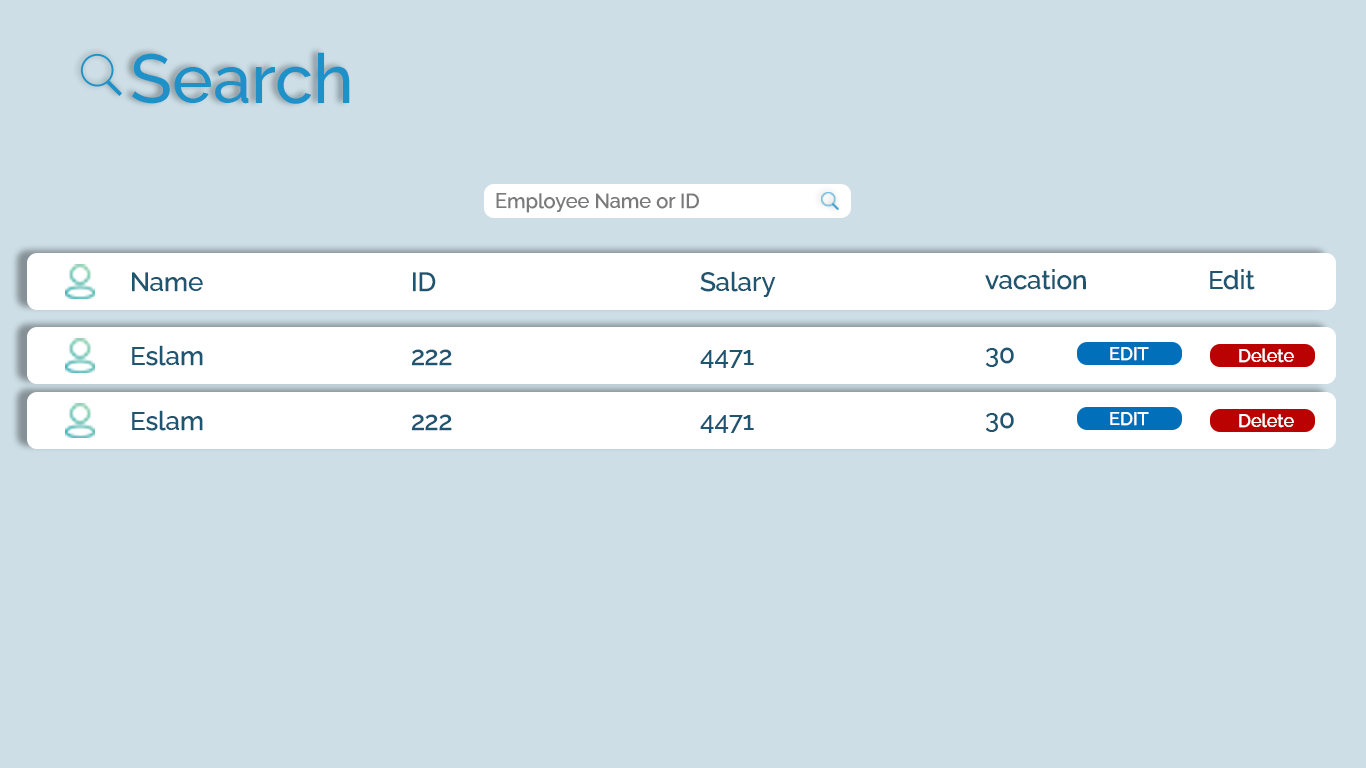
<style>
.page{position:relative;width:1366px;height:768px;background:#cddee6}
.page>*{position:absolute;margin:0}
.t1{font:69px "RalewayRoman-Medium";color:#1e92c8}
.t2{font:20px "RalewayRoman-Medium";color:#7a7a7a}
.t3{font:26px "RalewayRoman-Medium";color:#1e5571}
.t4{font:18px "RalewayRoman-Medium";color:#ffffff}
</style>
<div class="page">
<p class="t1" style="left:132px;top:52px;width:218px;height:52px">Search</p>
<p class="t2" style="left:496px;top:193px;width:203px;height:20px">Employee Name or ID</p>
<p class="t3" style="left:985px;top:269px;width:101px;height:21px">vacation</p>
<p class="t3" style="left:1210px;top:269px;width:45px;height:21px">Edit</p>
<p class="t3" style="left:132px;top:272px;width:71px;height:20px">Name</p>
<p class="t3" style="left:413px;top:272px;width:23px;height:20px">ID</p>
<p class="t3" style="left:700px;top:271px;width:76px;height:26px">Salary</p>
<p class="t3" style="left:132px;top:345px;width:71px;height:21px">Eslam</p>
<p class="t3" style="left:411px;top:349px;width:41px;height:17px">222</p>
<p class="t3" style="left:700px;top:350px;width:54px;height:18px">4471</p>
<p class="t3" style="left:985px;top:347px;width:29px;height:20px">30</p>
<p class="t4" style="left:1110px;top:347px;width:39px;height:14px">EDIT</p>
<p class="t4" style="left:1239px;top:348px;width:55px;height:15px">Delete</p>
<p class="t3" style="left:132px;top:410px;width:71px;height:21px">Eslam</p>
<p class="t3" style="left:411px;top:414px;width:41px;height:17px">222</p>
<p class="t3" style="left:985px;top:412px;width:29px;height:20px">30</p>
<p class="t4" style="left:1110px;top:412px;width:39px;height:14px">EDIT</p>
<p class="t4" style="left:1239px;top:413px;width:55px;height:15px">Delete</p>
<p class="t3" style="left:700px;top:415px;width:54px;height:18px">4471</p>
</div>
